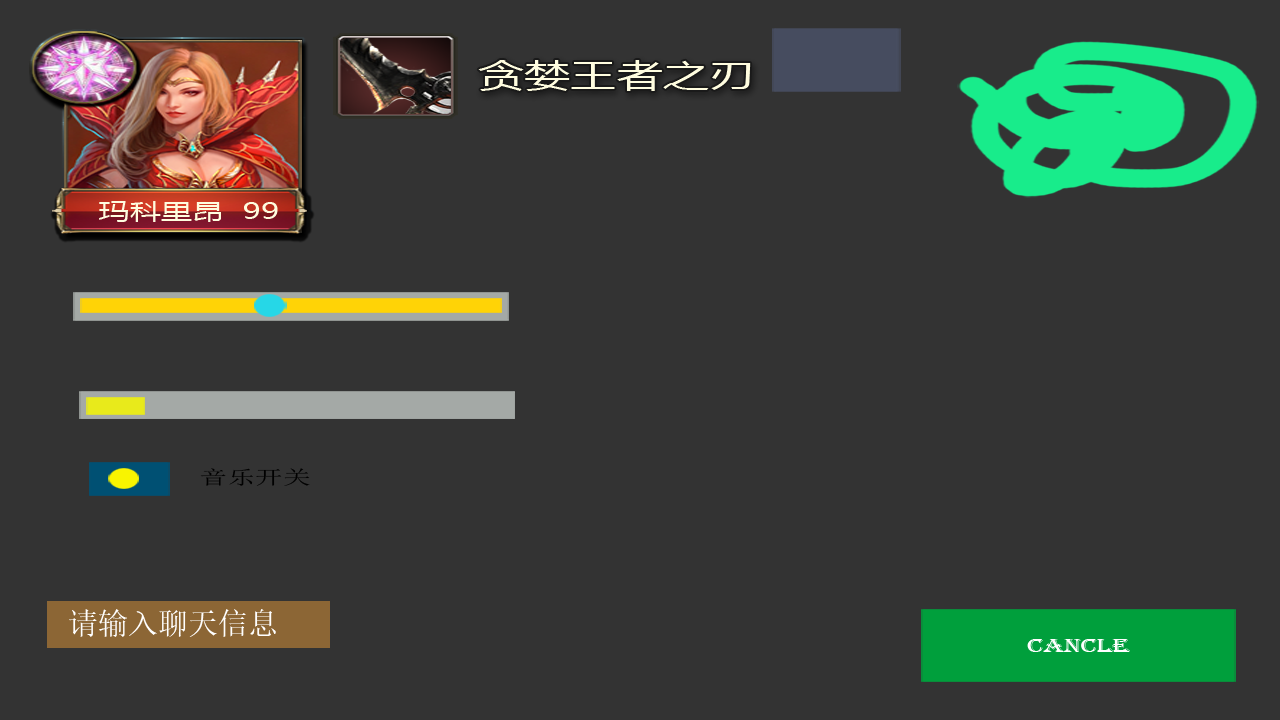
<style>
.page{position:relative;width:1280px;height:720px;background:#333333}
.page>*{position:absolute;margin:0}
.t1{font:32px "MicrosoftYaHei";color:#fffddf;scale:1.44 1}
.t2{font:21.8px "MicrosoftYaHei";color:#fffddf;scale:1.44 1}
.t3{font:19.2px "SimSun";color:#000000;scale:1.44 1}
.t4{font:30px "SimSun";color:#ffffff}
.t5{font:19.2px "Algerian";color:#ffffff;scale:1.44 1}
</style>
<div class="page">
<p class="t1" style="left:478px;top:60px;width:273px;height:31px">贪婪王者之刃</p>
<p class="t2" style="left:99px;top:201px;width:179px;height:21px">玛科里昂  99</p>
<p class="t3" style="left:200px;top:468px;width:110px;height:18px">音乐开关</p>
<p class="t4" style="left:69px;top:609px;width:207px;height:28px">请输入聊天信息</p>
<p class="t5" style="left:1027px;top:639px;width:103px;height:13px">Cancle</p>
</div>
